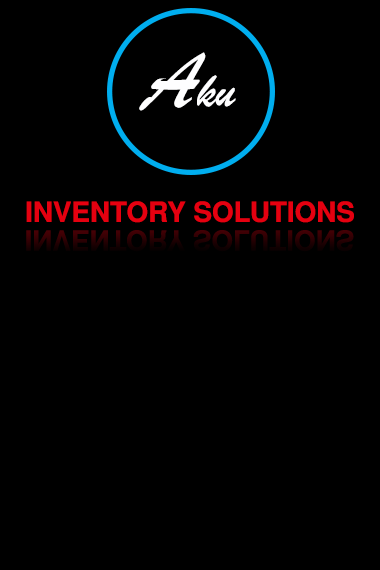
<style>
.page{position:relative;width:380px;height:570px;background:#000000}
.page>*{position:absolute;margin:0}
.t1{font:50px "BrushScriptMT";color:#fefeff}
.t2{font:83.3px "BrushScriptMT";color:#fefeff}
.t3{font:27.8px "TeXGyreHeros-Bold";color:#e50010}
</style>
<div class="page">
<p class="t1" style="left:139px;top:52px;width:97px;height:59px"><span class="t2">A</span>ku</p>
<p class="t3" style="left:26px;top:201px;width:328px;height:22px">INVENTORY SOLUTIONS</p>
</div>
